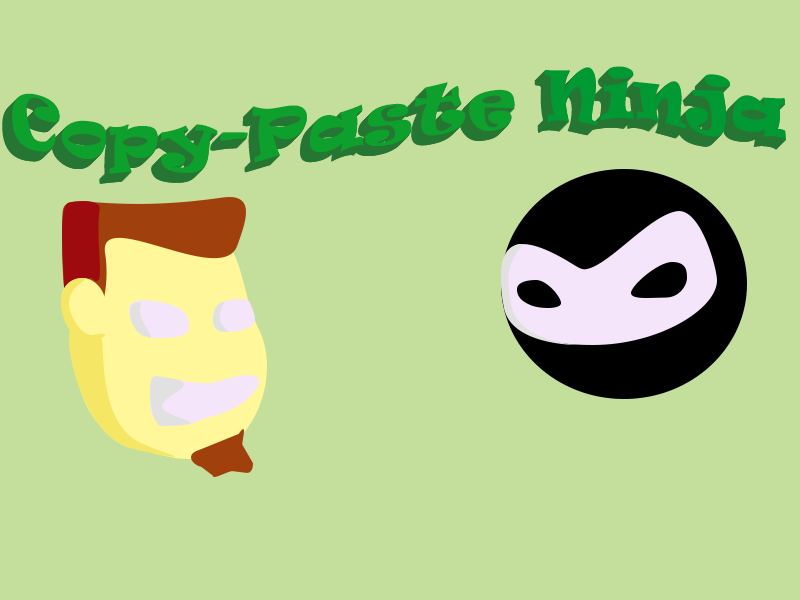
<style>
.page{position:relative;width:800px;height:600px;background:#c4df9b}
.page>*{position:absolute;margin:0}
.t1{font:65px "Ravie";color:#0da02c;font-weight:bold}
.t2{font:65px "Ravie";color:#009933;font-weight:bold}
</style>
<div class="page">
<p class="t1" style="left:12px;top:66px;width:774px;height:108px">Copy-Paste <span class="t2">Ninja</span></p>
</div>
